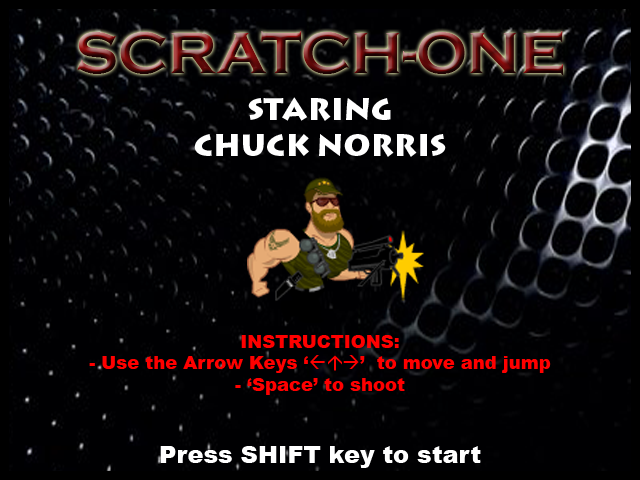
<style>
.page{position:relative;width:640px;height:480px;background:#000002}
.page>*{position:absolute;margin:0}
.t1{font:60px "CopperplateGothic-Bold"}
.t2{font:30px "LithosPro-Black";color:#ffffff}
.t3{font:18px "Arial-Black";color:#ff0000}
.t4{font:18px "Wingdings-Regular";color:#ff0000}
.t5{font:24px "Arial-Black";color:#ffffff}
</style>
<div class="page">
<p class="t1" style="left:77px;top:31px;width:486px;height:44px">SCRATCH-ONE</p>
<p class="t2" style="left:194px;top:97px;width:252px;height:60px;text-align:center">STARING<br>CHUCK NORRIS</p>
<p class="t3" style="left:89px;top:335px;width:462px;height:133px;text-align:center">INSTRUCTIONS:<br>- Use the Arrow Keys ‘<span class="t4">ßáà</span>’  to move and jump<br>- ‘Space’ to shoot<br><br><br><span class="t5">Press SHIFT key to start</span></p>
</div>
